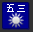
<style>
.page{position:relative;width:33px;height:32px;background:#000090}
.page>*{position:absolute;margin:0}
.t1{font:10.4px "SimSun";color:#ffffff}
</style>
<div class="page">
<p class="t1" style="left:7px;top:4px;width:18px;height:8px">五三</p>
</div>
